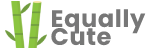
<style>
.page{position:relative;width:150px;height:50px;background:#ffffff}
.page>*{position:absolute;margin:0}
.t1{font:24px/18px "Poppins-Bold";letter-spacing:0.025em;color:#777777}
</style>
<div class="page">
<p class="t1" style="left:51px;top:9px;width:95px;height:37px">Equally<br>Cute</p>
</div>
